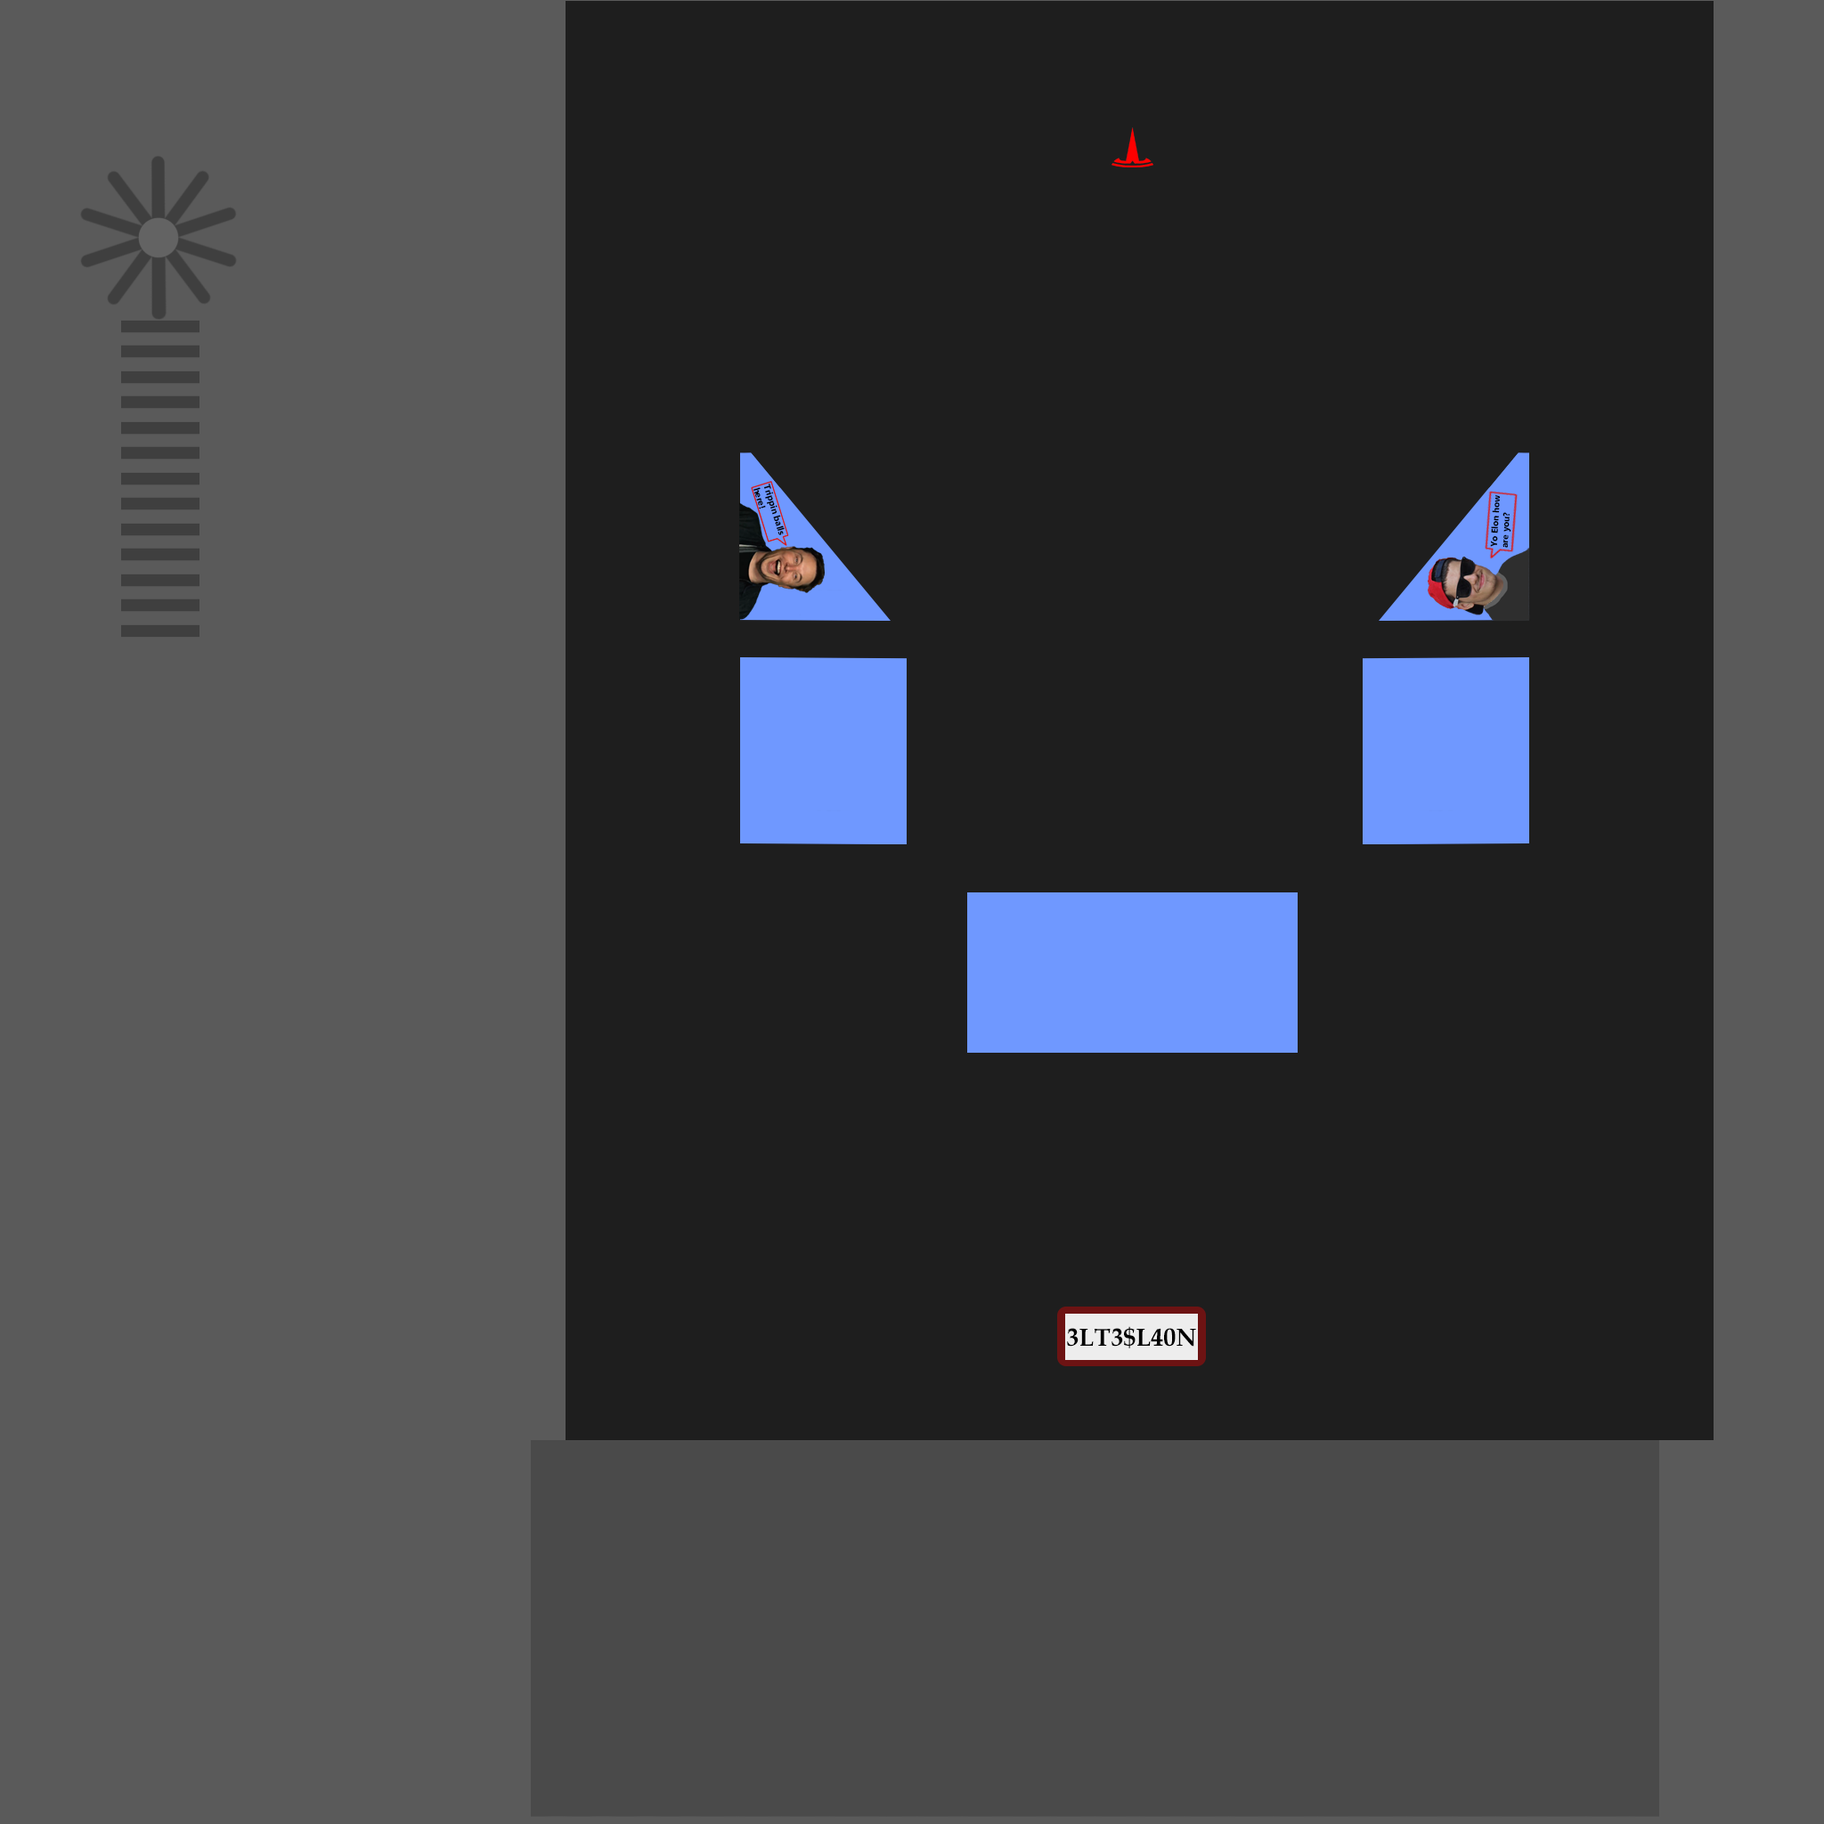
<style>
.page{position:relative;width:1824px;height:1824px;background:#1e1e1e}
.page>*{position:absolute;margin:0}
.t1{font:9px "MicrosoftTaiLe-Bold";color:#000000}
.t2{font:24.9px "BookAntiqua-Bold";color:#000000}
</style>
<div class="page">
<p class="t1" style="left:754px;top:484px;width:31px;height:51px;rotate:73deg">Trippin balls <br>here!</p>
<p class="t1" style="left:1490px;top:494px;width:22px;height:54px;rotate:-87deg">Yo Elon how<br>are you?</p>
<p class="t2" style="left:1067px;top:1326px;width:129px;height:23px">3LT3$L40N</p>
</div>
